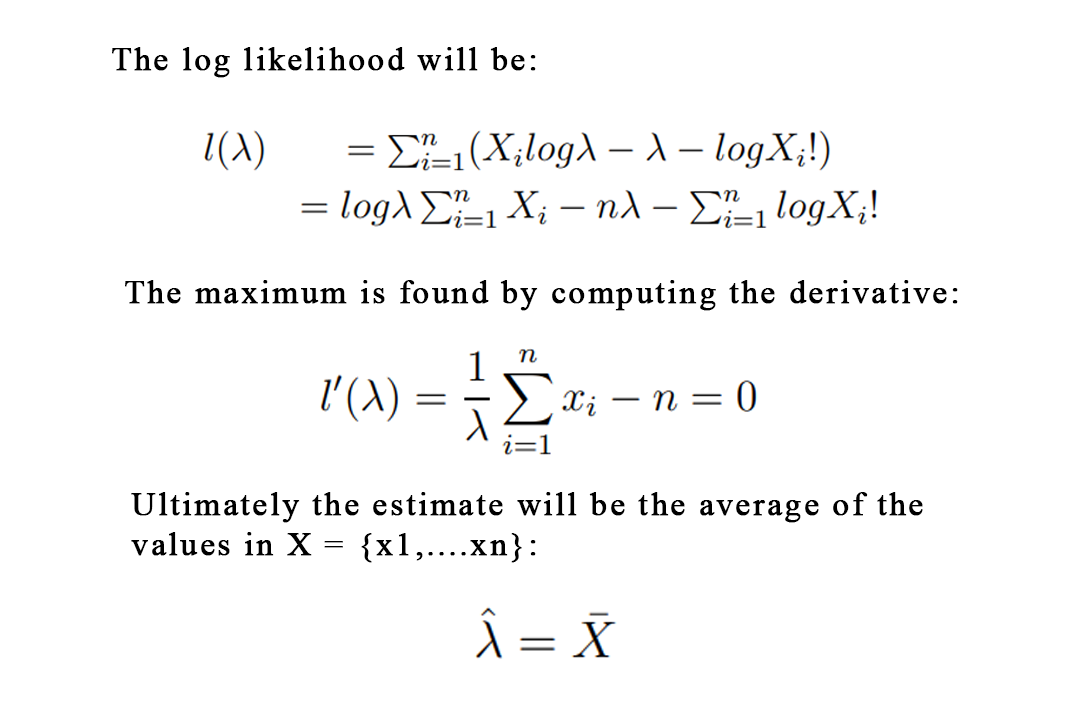
<style>
.page{position:relative;width:1080px;height:710px;background:#ffffff}
.page>*{position:absolute;margin:0}
.t1{font:33px "TimesNewRomanPSMT";letter-spacing:0.06em;color:#000000;font-weight:bold}
</style>
<div class="page">
<p class="t1" style="left:112px;top:47px;width:424px;height:31px">The log likelihood will be:</p>
<p class="t1" style="left:125px;top:280px;width:833px;height:31px">The maximum is found by computing the derivative:</p>
<p class="t1" style="left:131px;top:492px;width:792px;height:71px">Ultimately the estimate will be the average of the <br>values in X = {x1,....xn}:</p>
</div>
